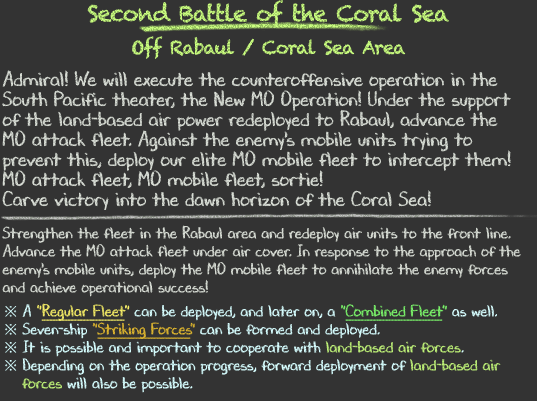
<style>
.page{position:relative;width:537px;height:401px;background:#333333}
.page>*{position:absolute;margin:0}
.t1{font:22px/36px "Chalkduster";letter-spacing:-0.04em}
.t2{font:18px/36px "Chalkduster";letter-spacing:-0.04em}
.t3{font:20px/20px "DJBChalkItUp";color:#d9ded6}
.t4{font:16px/18px "DJBChalkItUp";color:#d9ded6}
.t5{font:16px/24px "DJBChalkItUp";color:#d9ded6}
.t6{font:16px/18px "TimesNewRomanPSMT";color:#d7feff}
.t7{font:16px/18px "DJBChalkItUp";color:#d7feff}
.t8{font:16px/18px "DJBChalkItUp";color:#f5ed68}
.t9{font:16px/18px "DJBChalkItUp";color:#f5ed68;text-decoration:underline}
.t10{font:16px/18px "DJBChalkItUp";color:#7bf26b}
.t11{font:16px/18px "DJBChalkItUp";color:#7bf26b;text-decoration:underline}
.t12{font:16px/18px "DJBChalkItUp";color:#dfb731}
.t13{font:16px/18px "DJBChalkItUp";color:#dfb731;text-decoration:underline}
.t14{font:16px/18px "DJBChalkItUp";color:#bdef78}
</style>
<div class="page">
<p class="t1" style="left:87px;top:0px;width:362px;height:59px;text-align:center">Second Battle of the Coral Sea<br><span class="t2">Off Rabaul / Coral Sea Area</span></p>
<p class="t3" style="left:2px;top:70px;width:519px;height:323px">Admiral! We will execute the counteroffensive operation in the<br>South Pacific theater, the New MO Operation! Under the support<br>of the land-based air power redeployed to Rabaul, advance the<br>MO attack fleet. Against the enemy's mobile units trying to<br>prevent this, deploy our elite MO mobile fleet to intercept them!<br>MO attack fleet, MO mobile fleet, sortie!<br>Carve victory into the dawn horizon of the Coral Sea!<br><br><span class="t4">Strengthen the fleet in the Rabaul area and redeploy air units to the front line.<br>Advance the MO attack fleet under air cover. In response to the approach of the<br>enemy's mobile units, deploy the MO mobile fleet to annihilate the enemy forces<br>and achieve operational success</span><span class="t5">!<br></span><span class="t6">※ </span><span class="t7">A </span><span class="t8">"</span><span class="t9">Regular Fleet</span><span class="t8">"</span><span class="t7"> can be deployed, and later on, a </span><span class="t10">"</span><span class="t11">Combined Fleet</span><span class="t10">"</span><span class="t7"> as well.<br></span><span class="t6">※ </span><span class="t7">Seven-ship </span><span class="t12">"</span><span class="t13">Striking Forces</span><span class="t12">"</span><span class="t7"> can be formed and deployed.<br></span><span class="t6">※ </span><span class="t7">It is possible and important to cooperate with </span><span class="t14">land-based air forces</span><span class="t7">.<br></span><span class="t6">※ </span><span class="t7">Depending on the operation progress, forward deployment of </span><span class="t14">land-based air<br>　 forces</span><span class="t7"> will also be possible.</span></p>
</div>
